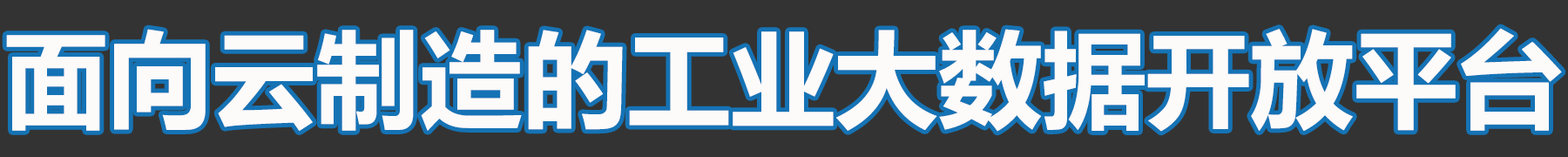
<style>
.page{position:relative;width:1568px;height:157px;background:#333333}
.page>*{position:absolute;margin:0}
.t1{font:104.5px "MicrosoftYaHei-Bold";color:#fdfafa}
</style>
<div class="page">
<p class="t1" style="left:6px;top:28px;width:1556px;height:104px">面向云制造的工业大数据开放平台</p>
</div>
